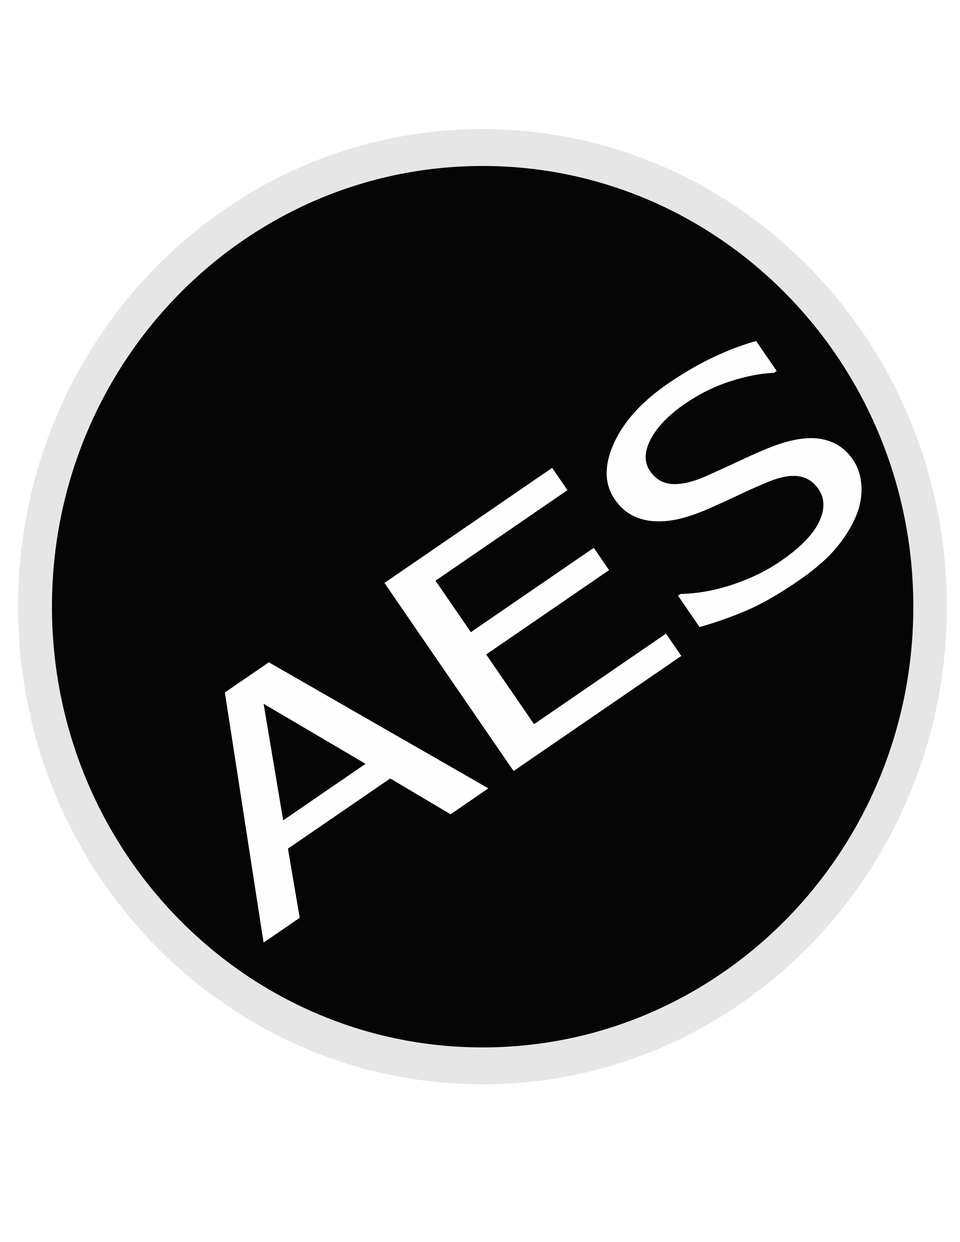
<style>
.page{position:relative;width:960px;height:1242px;background:#050505}
.page>*{position:absolute;margin:0}
.t1{font:313.7px "Tahoma";color:#fefefe;scale:1.43 1}
</style>
<div class="page">
<p class="t1" style="left:225px;top:341px;width:637px;height:602px;rotate:-34deg">AES</p>
</div>
